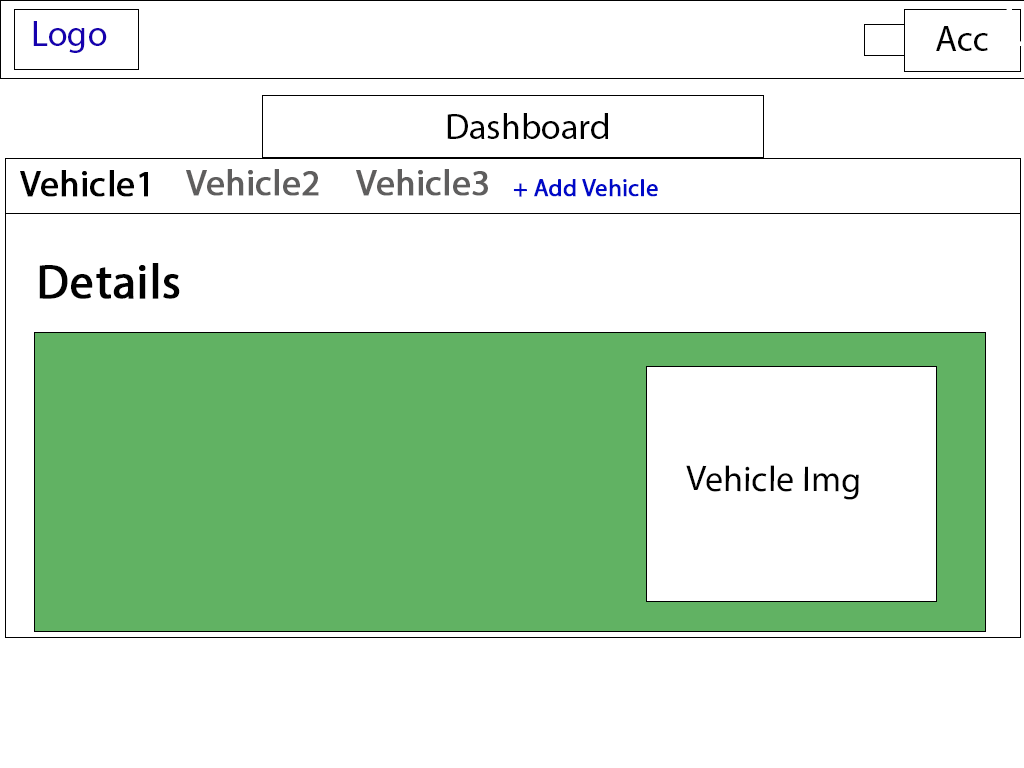
<style>
.page{position:relative;width:1024px;height:768px;background:#ffffff}
.page>*{position:absolute;margin:0}
.t1{font:36px "MyriadPro-Regular";color:#1601ae}
.t2{font:36px "MyriadPro-Regular";color:#000000}
.t3{font:36px "MyriadPro-Regular";color:#000000;font-weight:bold}
.t4{font:36px "MyriadPro-Regular";color:#5f5e5e;font-weight:bold}
.t5{font:24px "MyriadPro-Regular";color:#0009c8;font-weight:bold}
.t6{font:48px "MyriadPro-Regular";color:#010101;font-weight:bold}
</style>
<div class="page">
<p class="t1" style="left:33px;top:21px;width:74px;height:32px">Logo</p>
<p class="t2" style="left:936px;top:26px;width:52px;height:25px">Acc</p>
<p class="t2" style="left:447px;top:113px;width:161px;height:26px">Dashboard</p>
<p class="t3" style="left:20px;top:170px;width:128px;height:27px">Vehicle1</p>
<p class="t4" style="left:186px;top:169px;width:133px;height:27px">Vehicle2</p>
<p class="t4" style="left:356px;top:169px;width:132px;height:27px">Vehicle3</p>
<p class="t5" style="left:513px;top:179px;width:145px;height:18px">+ Add Vehicle</p>
<p class="t6" style="left:39px;top:263px;width:141px;height:36px">Details</p>
<p class="t2" style="left:686px;top:465px;width:173px;height:35px">Vehicle Img</p>
</div>
